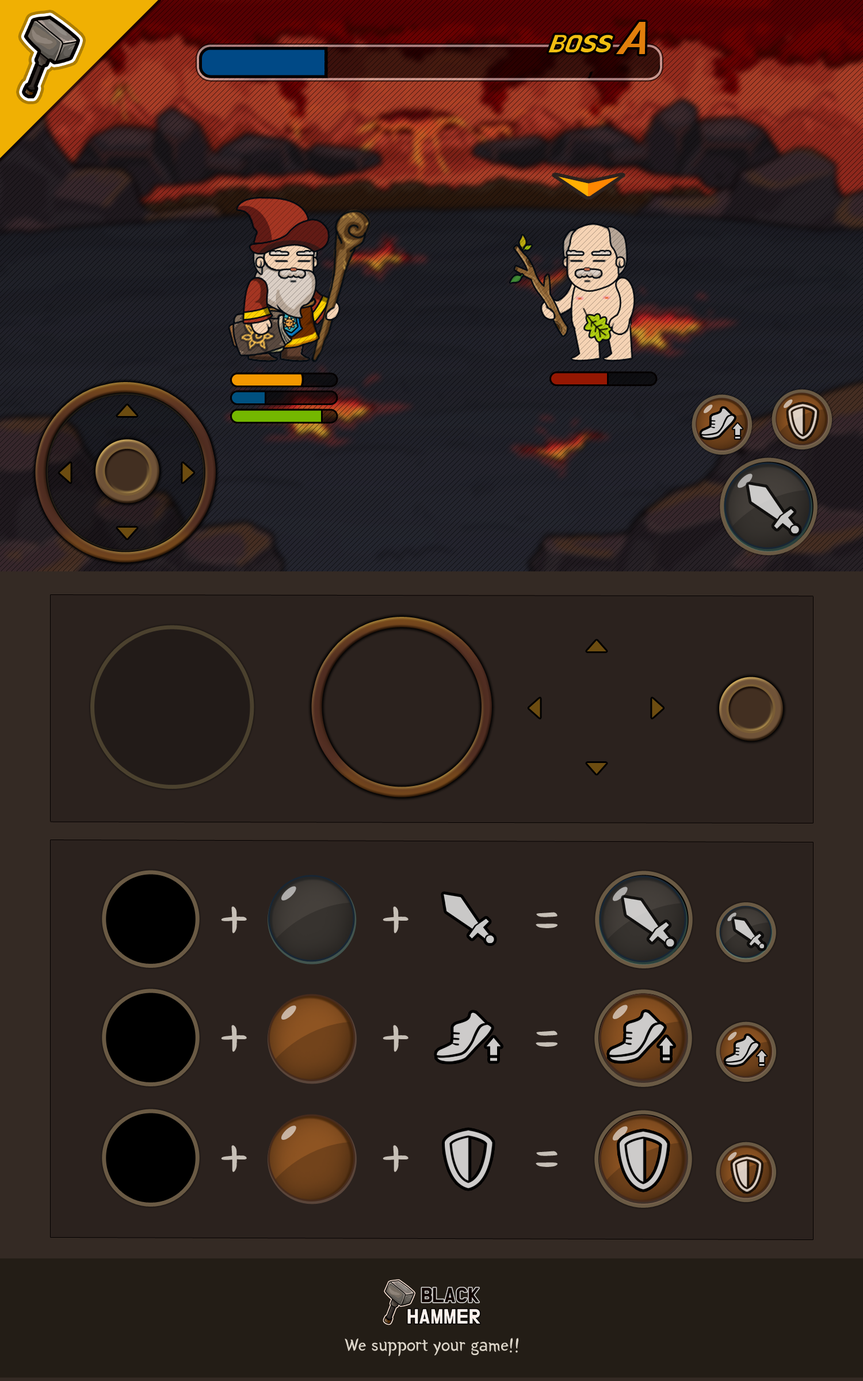
<style>
.page{position:relative;width:863px;height:1381px;background:#2b221e}
.page>*{position:absolute;margin:0}
.t1{font:48px "BMYEONSUNG";color:#c6bfb6;text-transform:uppercase}
.t2{font:18px "BMYEONSUNG";color:#dcd5c9}
</style>
<div class="page">
<p class="t1" style="left:221px;top:906px;width:26px;height:28px">+</p>
<p class="t1" style="left:383px;top:906px;width:26px;height:28px">+</p>
<p class="t1" style="left:536px;top:912px;width:22px;height:16px">=</p>
<p class="t1" style="left:221px;top:1025px;width:26px;height:27px">+</p>
<p class="t1" style="left:383px;top:1025px;width:26px;height:27px">+</p>
<p class="t1" style="left:536px;top:1031px;width:22px;height:16px">=</p>
<p class="t1" style="left:221px;top:1145px;width:26px;height:27px">+</p>
<p class="t1" style="left:383px;top:1145px;width:26px;height:27px">+</p>
<p class="t1" style="left:536px;top:1151px;width:22px;height:16px">=</p>
<p class="t2" style="left:345px;top:1338px;width:174px;height:19px">We support your game!!</p>
</div>
